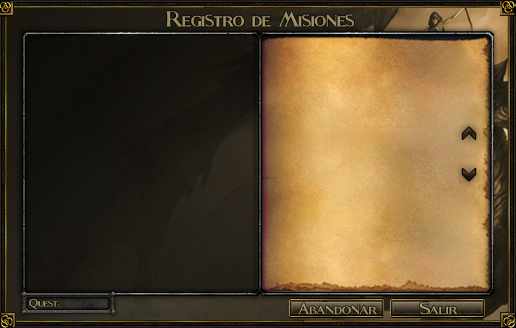
<style>
.page{position:relative;width:516px;height:328px}
.page>*{position:absolute;margin:0}
.t1{font:40.9px "Fleet-Street";color:#9b8e61;scale:0.94 1}
.t2{font:21px "Fleet-Street";color:#a09368}
.t3{font:30px "Fleet-Street";color:#a19466}
.t4{font:30px "Fleet-Street";color:#a29466}
</style>
<div class="page">
<p class="t1" style="left:166px;top:11px;width:188px;height:17px">Registro de Misiones</p>
<p class="t2" style="left:29px;top:298px;width:31px;height:12px">Quest:</p>
<p class="t3" style="left:297px;top:302px;width:80px;height:13px">Abandonar</p>
<p class="t4" style="left:419px;top:302px;width:39px;height:13px">Salir</p>
</div>
